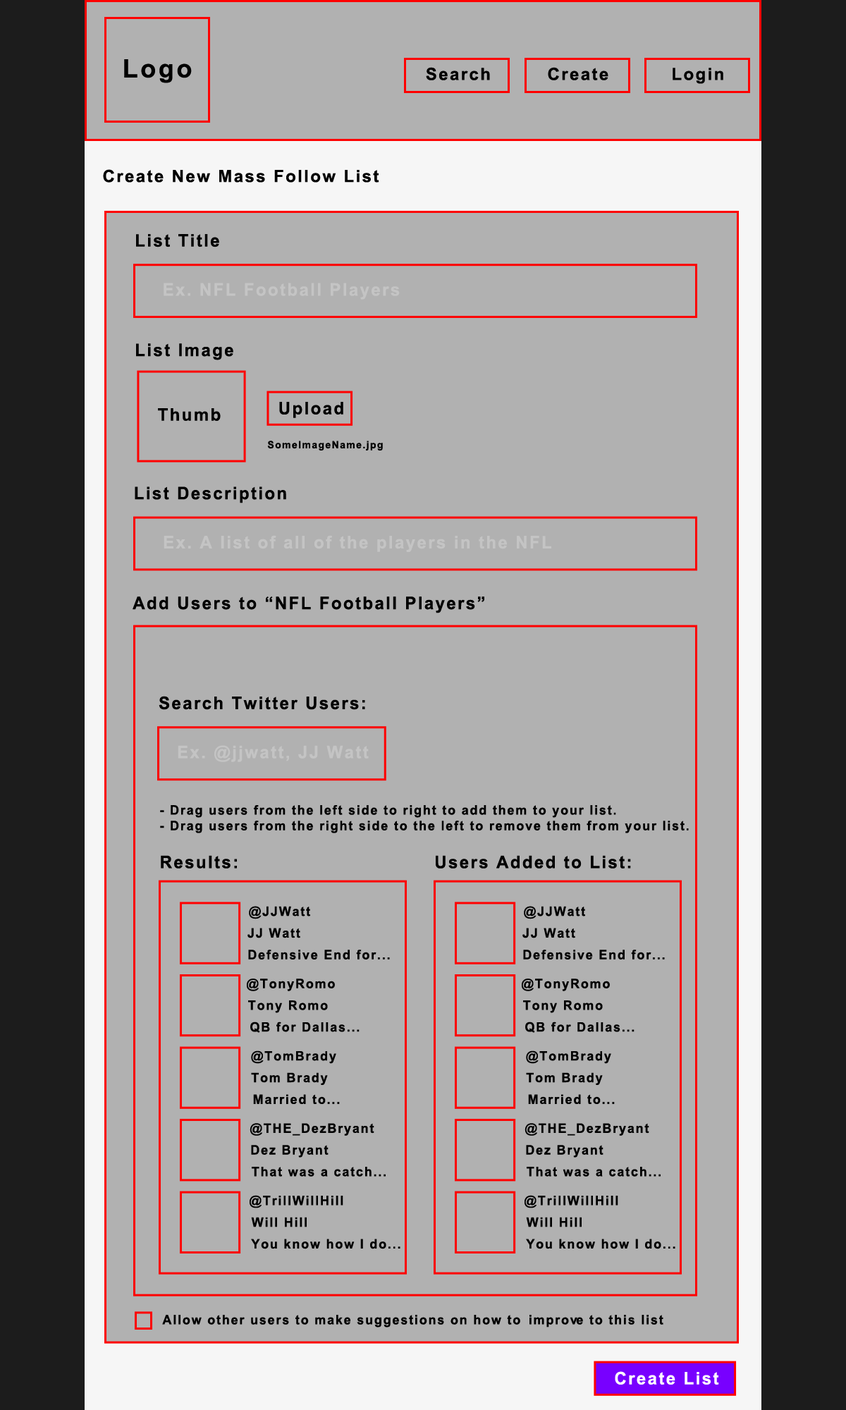
<style>
.page{position:relative;width:846px;height:1410px;background:#b1b1b1}
.page>*{position:absolute;margin:0}
.t1{font:25.4px "Arial-BoldMT";letter-spacing:0.1em;color:#000000}
.t2{font:16.9px "Arial-BoldMT";letter-spacing:0.1em;color:#000000}
.t3{font:17.3px "Arial-BoldMT";letter-spacing:0.1em;color:#000000}
.t4{font:17.3px "Arial-BoldMT";letter-spacing:0.1em;color:#c4c4c4}
.t5{font:10.1px "Arial-BoldMT";letter-spacing:0.1em;color:#000000}
.t6{font:13px "Arial-BoldMT";letter-spacing:0.1em;color:#000000}
.t7{font:17.3px "Arial-BoldMT";letter-spacing:0.1em;color:#ffffff}
</style>
<div class="page">
<p class="t1" style="left:124px;top:59px;width:68px;height:24px">Logo</p>
<p class="t2" style="left:426px;top:67px;width:64px;height:13px">Search</p>
<p class="t2" style="left:548px;top:67px;width:60px;height:13px">Create</p>
<p class="t2" style="left:672px;top:68px;width:51px;height:16px">Login</p>
<p class="t2" style="left:103px;top:169px;width:276px;height:14px">Create New Mass Follow List</p>
<p class="t3" style="left:136px;top:234px;width:83px;height:13px">List Title</p>
<p class="t4" style="left:164px;top:283px;width:236px;height:17px">Ex. NFL Football Players</p>
<p class="t3" style="left:136px;top:343px;width:97px;height:17px">List Image</p>
<p class="t3" style="left:279px;top:402px;width:64px;height:16px">Upload</p>
<p class="t3" style="left:158px;top:408px;width:63px;height:13px">Thumb</p>
<p class="t5" style="left:267px;top:441px;width:116px;height:9px">SomeImageName.jpg</p>
<p class="t3" style="left:135px;top:486px;width:151px;height:17px">List Description</p>
<p class="t4" style="left:164px;top:535px;width:387px;height:17px">Ex. A list of all of the players in the NFL</p>
<p class="t3" style="left:133px;top:596px;width:351px;height:17px">Add Users to “NFL Football Players”</p>
<p class="t3" style="left:159px;top:696px;width:206px;height:14px">Search Twitter Users:</p>
<p class="t4" style="left:178px;top:745px;width:191px;height:17px">Ex. @jjwatt, JJ Watt</p>
<p class="t6" style="left:160px;top:805px;width:529px;height:28px">- Drag users from the left side to right to add them to your list.<br>- Drag users from the right side to the left to remove them from your list.</p>
<p class="t3" style="left:161px;top:855px;width:76px;height:13px">Results:</p>
<p class="t3" style="left:436px;top:855px;width:195px;height:13px">Users Added to List:</p>
<p class="t6" style="left:249px;top:906px;width:61px;height:13px">@JJWatt</p>
<p class="t6" style="left:524px;top:906px;width:61px;height:13px">@JJWatt</p>
<p class="t6" style="left:247px;top:928px;width:53px;height:10px">JJ Watt</p>
<p class="t6" style="left:522px;top:928px;width:53px;height:10px">JJ Watt</p>
<p class="t6" style="left:248px;top:949px;width:142px;height:10px">Defensive End for...</p>
<p class="t6" style="left:523px;top:949px;width:142px;height:10px">Defensive End for...</p>
<p class="t6" style="left:247px;top:978px;width:88px;height:13px">@TonyRomo</p>
<p class="t6" style="left:522px;top:978px;width:88px;height:13px">@TonyRomo</p>
<p class="t6" style="left:248px;top:1000px;width:80px;height:13px">Tony Romo</p>
<p class="t6" style="left:523px;top:1000px;width:80px;height:13px">Tony Romo</p>
<p class="t6" style="left:250px;top:1021px;width:109px;height:12px">QB for Dallas...</p>
<p class="t6" style="left:525px;top:1021px;width:109px;height:12px">QB for Dallas...</p>
<p class="t6" style="left:251px;top:1050px;width:85px;height:14px">@TomBrady</p>
<p class="t6" style="left:526px;top:1050px;width:85px;height:14px">@TomBrady</p>
<p class="t6" style="left:251px;top:1072px;width:77px;height:13px">Tom Brady</p>
<p class="t6" style="left:526px;top:1072px;width:77px;height:13px">Tom Brady</p>
<p class="t6" style="left:253px;top:1094px;width:87px;height:10px">Married to...</p>
<p class="t6" style="left:528px;top:1094px;width:87px;height:10px">Married to...</p>
<p class="t6" style="left:250px;top:1123px;width:124px;height:13px">@THE_DezBryant</p>
<p class="t6" style="left:524px;top:1123px;width:125px;height:13px">@THE_DezBryant</p>
<p class="t6" style="left:251px;top:1145px;width:77px;height:12px">Dez Bryant</p>
<p class="t6" style="left:526px;top:1145px;width:77px;height:12px">Dez Bryant</p>
<p class="t6" style="left:252px;top:1167px;width:134px;height:9px">That was a catch...</p>
<p class="t6" style="left:527px;top:1167px;width:133px;height:9px">That was a catch...</p>
<p class="t6" style="left:250px;top:1195px;width:93px;height:13px">@TrillWillHill</p>
<p class="t6" style="left:524px;top:1195px;width:94px;height:13px">@TrillWillHill</p>
<p class="t6" style="left:251px;top:1217px;width:56px;height:10px">Will Hill</p>
<p class="t6" style="left:526px;top:1217px;width:56px;height:10px">Will Hill</p>
<p class="t6" style="left:251px;top:1238px;width:149px;height:11px">You know how I do...</p>
<p class="t6" style="left:526px;top:1238px;width:149px;height:11px">You know how I do...</p>
<p class="t6" style="left:162px;top:1315px;width:501px;height:12px">Allow other users to make suggestions on how to improve to this list</p>
<p class="t7" style="left:615px;top:1371px;width:104px;height:13px">Create List</p>
</div>
